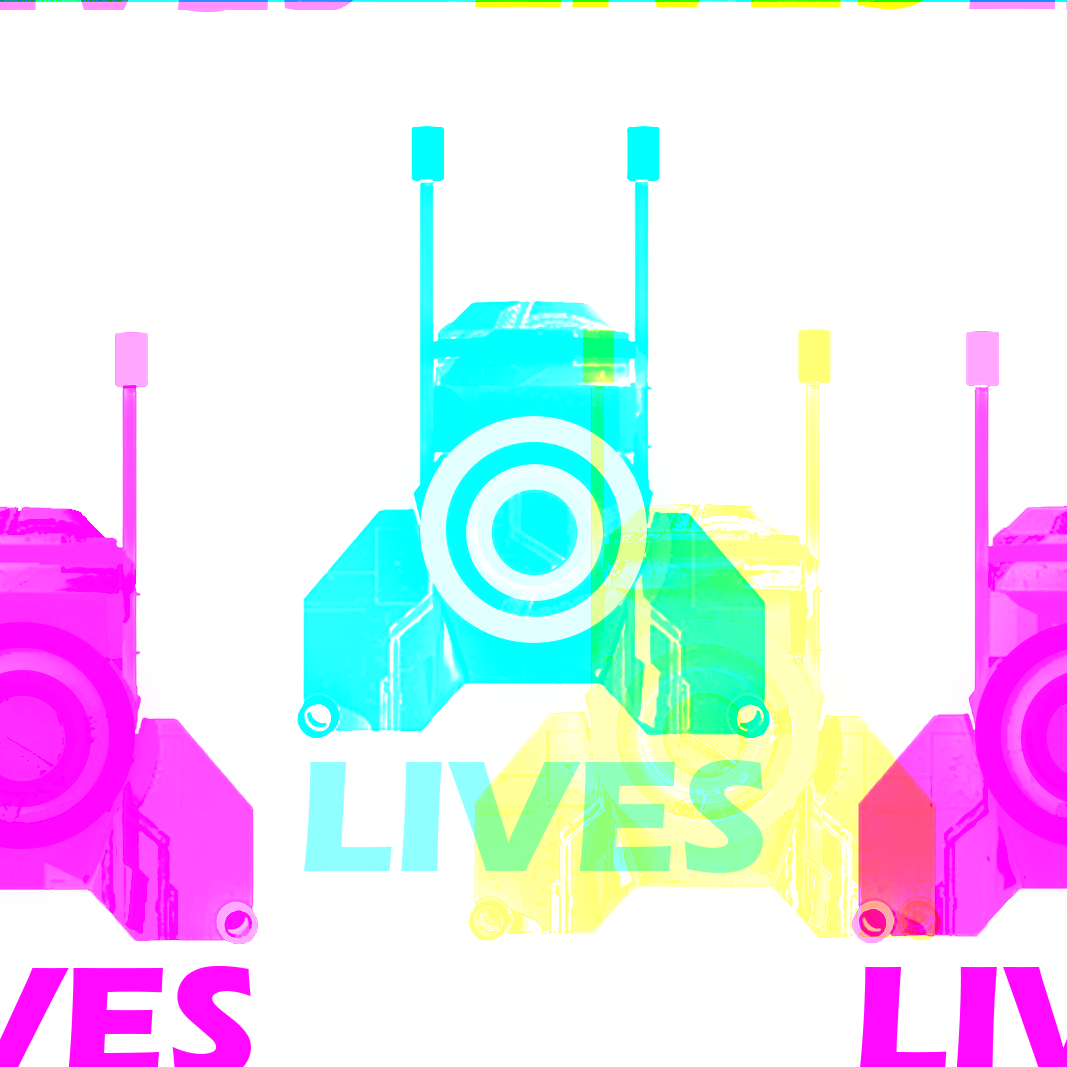
<style>
.page{position:relative;width:1067px;height:1067px;background:#ffffff}
.page>*{position:absolute;margin:0}
.t1{font:163.6px "ErasITC-Bold";text-transform:uppercase}
</style>
<div class="page">
<p class="t1" style="left:304px;top:758px;width:459px;height:113px">Lives</p>
</div>
